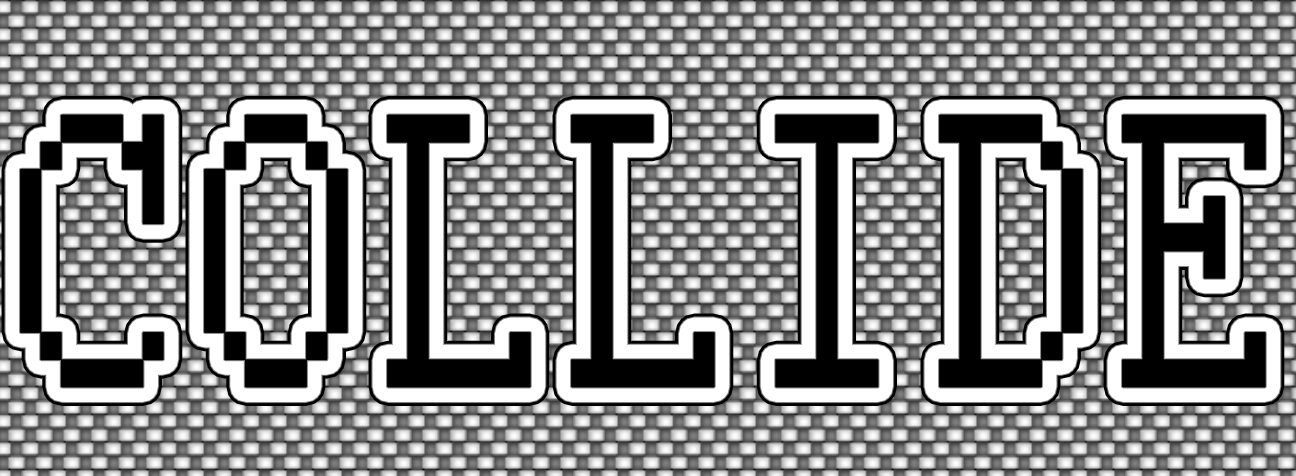
<style>
.page{position:relative;width:1296px;height:476px}
.page>*{position:absolute;margin:0}
.t1{font:435.3px "Courier";color:#000000;scale:0.75 1}
</style>
<div class="page">
<p class="t1" style="left:20px;top:115px;width:1246px;height:272px">COLLIDE</p>
</div>
